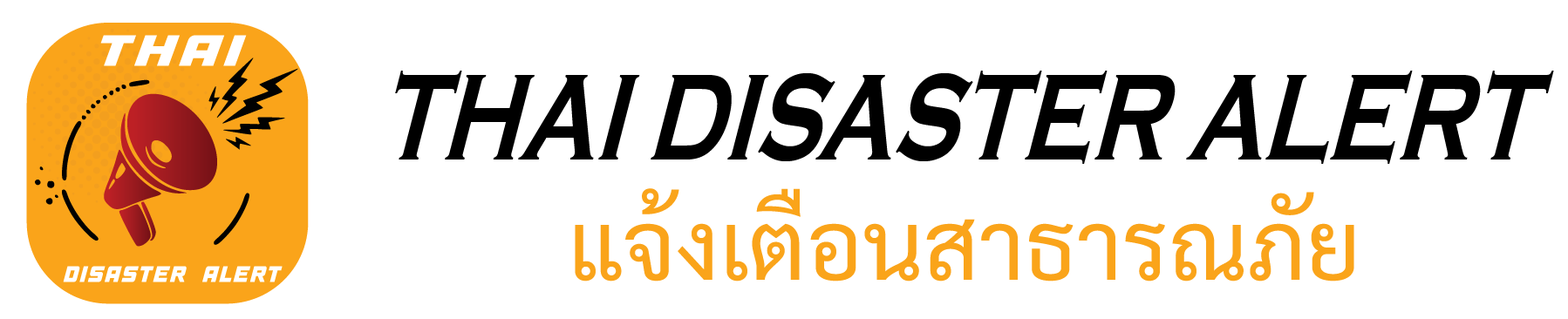
<style>
.page{position:relative;width:1568px;height:319px;background:#ffffff}
.page>*{position:absolute;margin:0}
.t1{font:131.7px "CopperplateGothic-Bold";color:#000000;scale:0.69 1}
.t2{font:95.3px "Sarabun-Regular";color:#faa41a}
</style>
<div class="page">
<p class="t1" style="left:395px;top:71px;width:1159px;height:93px">THAI DISASTER ALERT</p>
<p class="t2" style="left:575px;top:188px;width:779px;height:94px">แจ้งเตือนสาธารณภัย</p>
</div>
